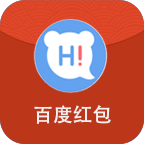
<style>
.page{position:relative;width:144px;height:144px;background:#bc361a}
.page>*{position:absolute;margin:0}
.t1{font:19.8px "AdobeHeitiStd-Regular";color:#f5efee}
</style>
<div class="page">
<p class="t1" style="left:34px;top:105px;width:77px;height:19px">百度红包</p>
</div>
